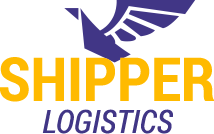
<style>
.page{position:relative;width:214px;height:134px;background:#ffffff}
.page>*{position:absolute;margin:0}
.t1{font:60.5px "RobotoCondensed-Bold";color:#ffba00}
.t2{font:32.2px "RobotoCondensed-Italic";color:#413686}
</style>
<div class="page">
<p class="t1" style="left:0px;top:57px;width:214px;height:45px">SHIPPER</p>
<p class="t2" style="left:42px;top:109px;width:131px;height:25px">LOGISTICS</p>
</div>
